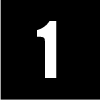
<style>
.page{position:relative;width:100px;height:100px;background:#000000}
.page>*{position:absolute;margin:0}
.t1{font:72px "Impact";letter-spacing:0.1em;color:#ffffff;scale:0.8 1}
</style>
<div class="page">
<p class="t1" style="left:37px;top:21px;width:20px;height:57px">1</p>
</div>
